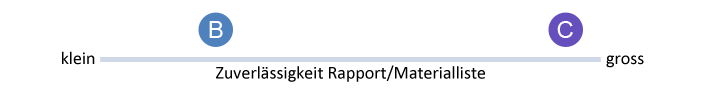
<style>
.page{position:relative;width:717px;height:90px;background:#ffffff}
.page>*{position:absolute;margin:0}
.t1{font:24px "ArialMT";color:#ffffff}
.t2{font:18px "Calibri";color:#000000}
</style>
<div class="page">
<p class="t1" style="left:209px;top:21px;width:14px;height:17px">B</p>
<p class="t1" style="left:557px;top:21px;width:16px;height:17px">C</p>
<p class="t2" style="left:62px;top:51px;width:33px;height:14px">klein</p>
<p class="t2" style="left:216px;top:65px;width:269px;height:17px">Zuverlässigkeit Rapport/Materialliste</p>
<p class="t2" style="left:606px;top:55px;width:38px;height:13px">gross</p>
</div>
